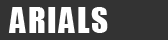
<style>
.page{position:relative;width:168px;height:40px;background:#333333}
.page>*{position:absolute;margin:0}
.t1{font:33px "Impact";letter-spacing:0.05em;color:#ffffff}
</style>
<div class="page">
<p class="t1" style="left:8px;top:7px;width:100px;height:26px">ARIALS</p>
</div>
